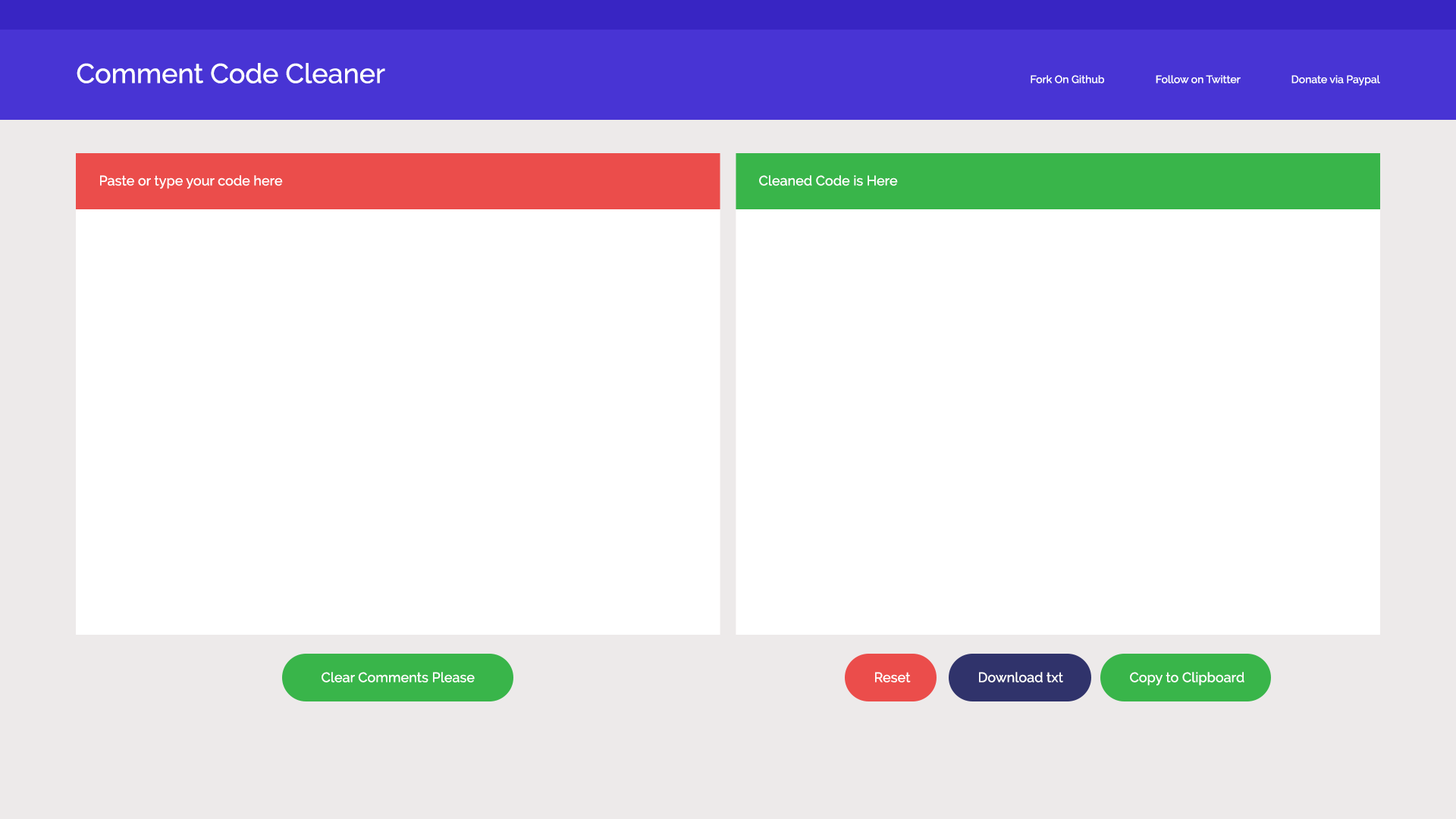
<style>
.page{position:relative;width:1456px;height:819px;background:#ffffff}
.page>*{position:absolute;margin:0}
.t1{font:27.3px "Raleway-Medium";color:#ffffff}
.t2{font:10.6px "Raleway-Medium";color:#ffffff}
.t3{font:13.6px "Raleway-Medium";color:#ffffff}
</style>
<div class="page">
<p class="t1" style="left:77px;top:63px;width:308px;height:20px">Comment Code Cleaner</p>
<p class="t2" style="left:1031px;top:75px;width:349px;height:11px">Fork On Github                   Follow on Twitter                   Donate via Paypal</p>
<p class="t3" style="left:100px;top:175px;width:183px;height:14px">Paste or type your code here</p>
<p class="t3" style="left:759px;top:175px;width:139px;height:11px">Cleaned Code is Here</p>
<p class="t3" style="left:322px;top:672px;width:153px;height:10px">Clear Comments Please</p>
<p class="t3" style="left:875px;top:672px;width:36px;height:10px">Reset</p>
<p class="t3" style="left:979px;top:672px;width:84px;height:10px">Download txt</p>
<p class="t3" style="left:1130px;top:672px;width:114px;height:14px">Copy to Clipboard</p>
</div>
